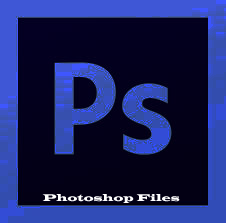
<style>
.page{position:relative;width:226px;height:223px}
.page>*{position:absolute;margin:0}
.t1{font:10px "LatinWide";color:#ffffff}
</style>
<div class="page">
<p class="t1" style="left:42px;top:194px;width:138px;height:9px">Photoshop Files</p>
</div>
